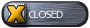
<style>
.page{position:relative;width:90px;height:28px}
.page>*{position:absolute;margin:0}
.t1{font:9px "Madison-Avenue";color:#ffffff}
</style>
<div class="page">
<p class="t1" style="left:29px;top:10px;width:34px;height:8px">CLOSED</p>
</div>
